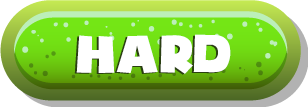
<style>
.page{position:relative;width:308px;height:107px}
.page>*{position:absolute;margin:0}
.t1{font:59.8px "SoupofJustice";color:#ffffff;text-transform:uppercase;scale:1.2 1}
</style>
<div class="page">
<p class="t1" style="left:76px;top:34px;width:155px;height:40px">HARD</p>
</div>
